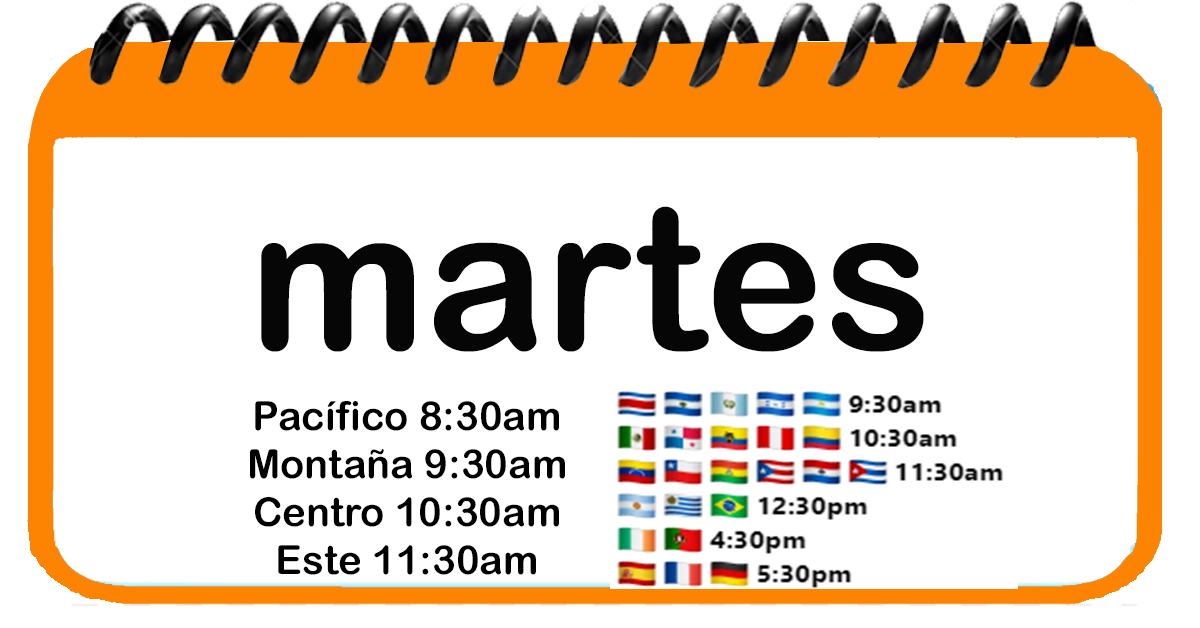
<style>
.page{position:relative;width:1200px;height:628px;background:#ffffff}
.page>*{position:absolute;margin:0}
.t1{font:200px "ArialRoundedMTBold";color:#060606}
.t2{font:40px "ArialRoundedMTBold";color:#000000}
</style>
<div class="page">
<p class="t1" style="left:261px;top:206px;width:663px;height:146px">martes</p>
<p class="t2" style="left:250px;top:401px;width:315px;height:174px;text-align:center">Pacífico 8:30am<br>Montaña 9:30am<br>Centro 10:30am<br>Este 11:30am</p>
</div>
